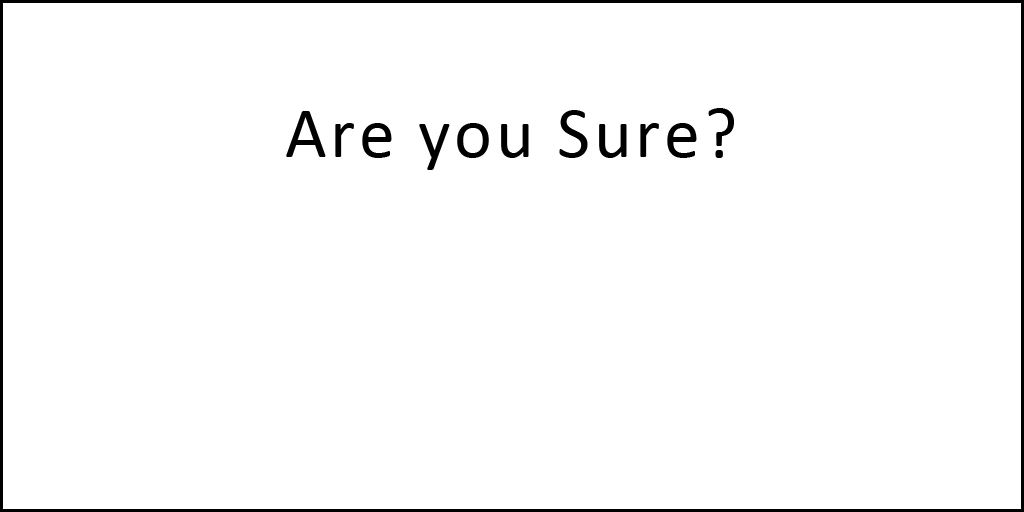
<style>
.page{position:relative;width:1024px;height:512px;background:#ffffff}
.page>*{position:absolute;margin:0}
.t1{font:72px "Calibri";letter-spacing:0.05em;color:#000000}
</style>
<div class="page">
<p class="t1" style="left:286px;top:108px;width:448px;height:62px">Are you Sure?</p>
</div>
